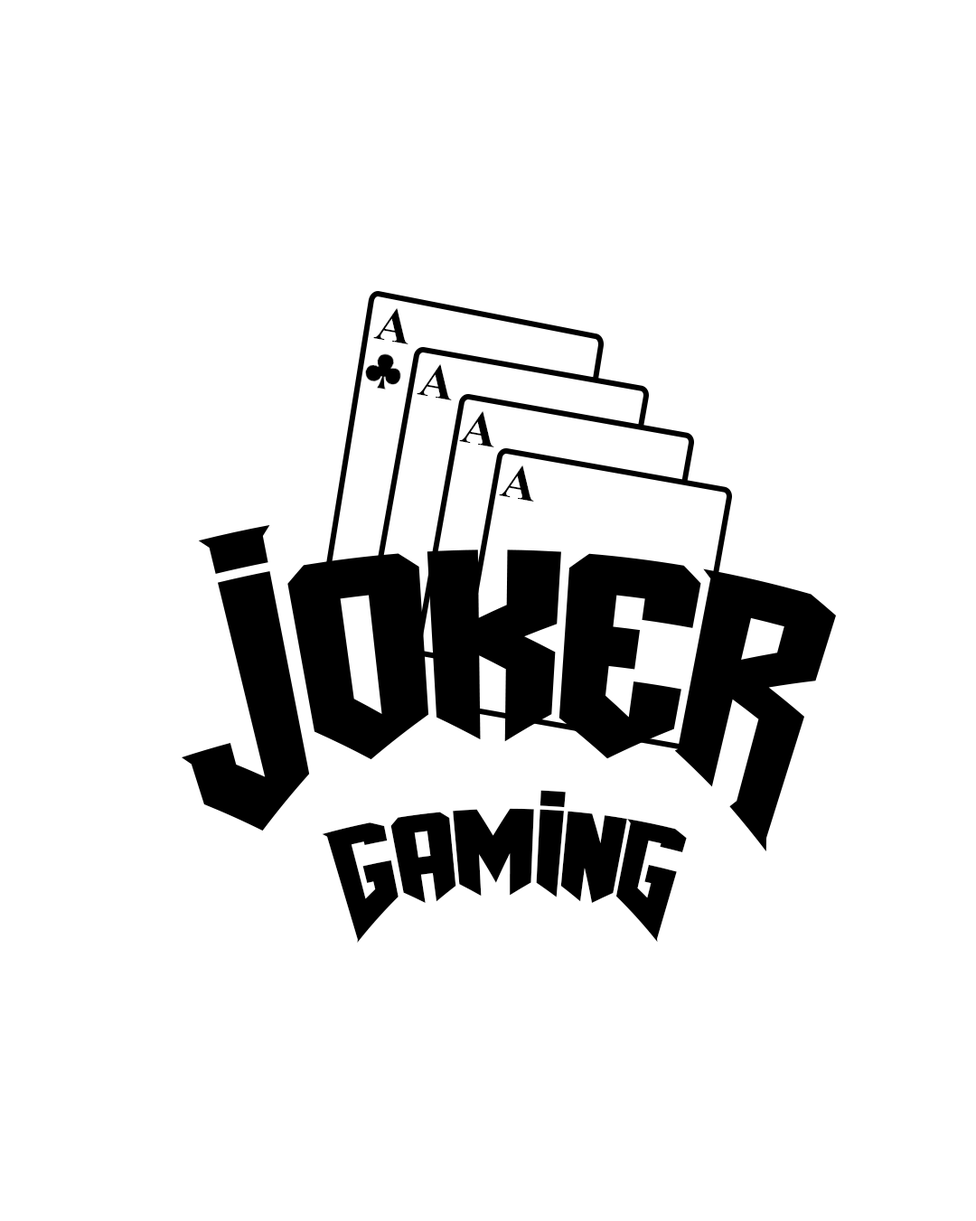
<style>
.page{position:relative;width:976px;height:1221px;background:#ffffff}
.page>*{position:absolute;margin:0}
.t1{font:49.4px "TimesNewRomanPS-BoldMT";color:#000000}
.t2{font:146.2px "AmazDooMRight";color:#000000;scale:1.05 1}
.t3{font:146.2px "AmazDooMLeft";color:#000000;scale:1.05 1}
</style>
<div class="page">
<p class="t1" style="left:373px;top:308px;width:36px;height:36px;rotate:10deg">A</p>
<p class="t1" style="left:417px;top:364px;width:35px;height:36px;rotate:10deg">A</p>
<p class="t1" style="left:459px;top:411px;width:35px;height:36px;rotate:10deg">A</p>
<p class="t1" style="left:499px;top:466px;width:35px;height:36px;rotate:10deg">A</p>
<p class="t2" style="left:322px;top:790px;width:365px;height:153px"><span class="t3">G</span>aminG</p>
</div>
